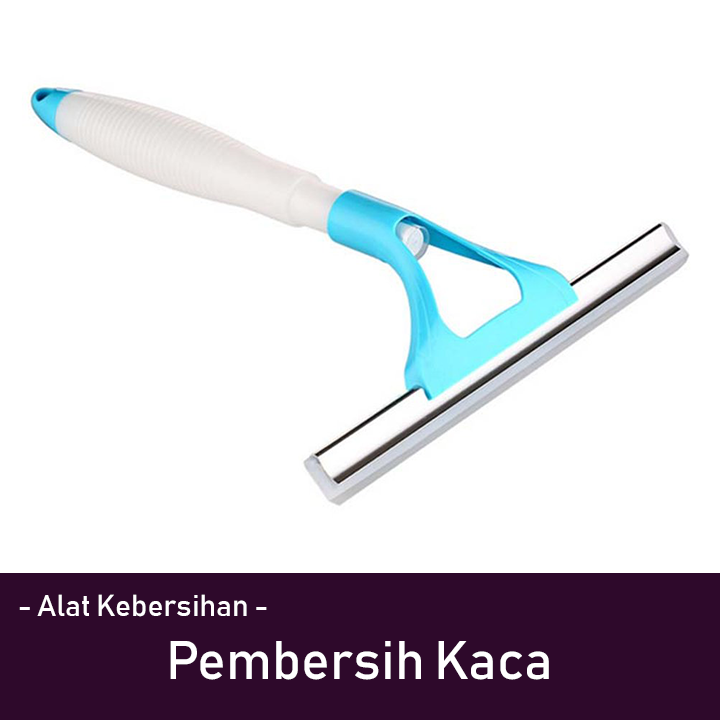
<style>
.page{position:relative;width:720px;height:720px;background:#ffffff}
.page>*{position:absolute;margin:0}
.t1{font:30px "Bahnschrift";color:#ffffff}
.t2{font:53.6px "Bahnschrift";color:#ffffff}
</style>
<div class="page">
<p class="t1" style="left:19px;top:594px;width:248px;height:23px">- Alat Kebersihan -</p>
<p class="t2" style="left:170px;top:641px;width:379px;height:39px">Pembersih Kaca</p>
</div>
